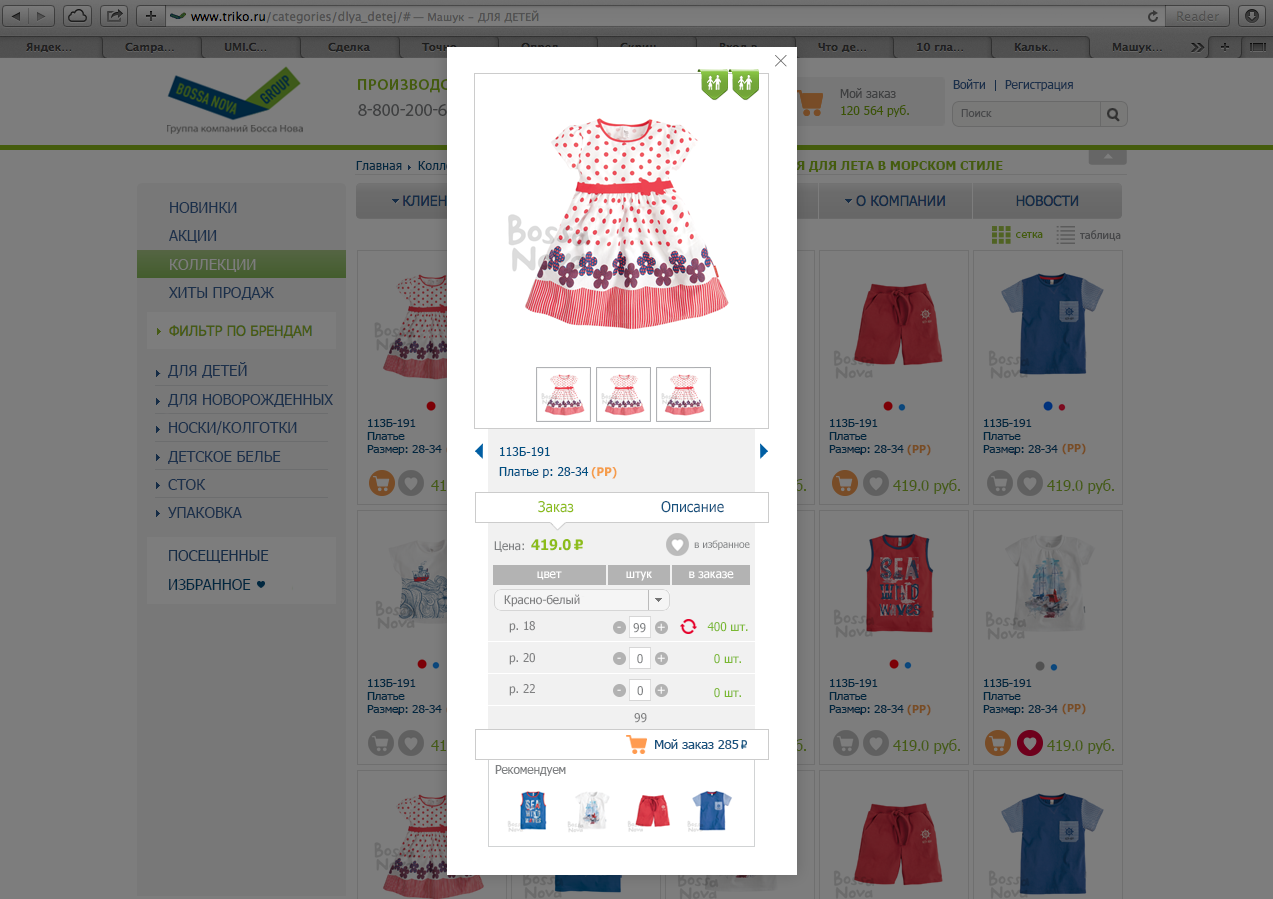
<style>
.page{position:relative;width:1273px;height:899px;background:#7d7d7d}
.page>*{position:absolute;margin:0}
.t1{font:12px "Tahoma";color:#3f4041}
.t2{font:12px "Tahoma";color:#1b304b}
.t3{font:12px "Tahoma";color:#3c5404}
.t4{font:11px "Tahoma";letter-spacing:0.005em;color:#48494b}
.t5{font:12px "Tahoma";color:#00273f;scale:1.04 1}
.t6{font:15.2px/28.4px "Tahoma";letter-spacing:-0.01em;color:#1b304b;text-transform:uppercase}
.t7{font:11.5px "MyriadPro-Regular";color:#455c0d}
.t8{font:11.5px "MyriadPro-Regular";color:#48494b}
.t9{font:15.2px "Tahoma";letter-spacing:-0.01em;color:#7d7d7d;text-transform:uppercase}
.t10{font:11px/13px "Tahoma";color:#00273f;scale:1.05 1}
.t11{font:11px/13px "Tahoma";color:#00273f;text-transform:uppercase;scale:1.05 1}
.t12{font:11.6px/20px "Tahoma";color:#004f81;scale:1.05 1}
.t13{font:11.6px/20px "Tahoma";color:#004f81;text-transform:uppercase;scale:1.05 1}
.t14{font:11px "Tahoma-Bold";letter-spacing:-0.005em;color:#784d25}
.t15{font:12px "Tahoma-Bold";letter-spacing:-0.005em;color:#f59d4b}
.t16{font:15px "Tahoma";letter-spacing:-0.025em;color:#465b15;text-transform:uppercase}
.t17{font:15px "Tahoma";letter-spacing:-0.025em;color:#465b15}
.t18{font:14.8px "Tahoma";letter-spacing:-0.005em;color:#8cbc1a;scale:0.96 1}
.t19{font:14.8px "Tahoma";letter-spacing:-0.005em;color:#17527e;scale:0.96 1}
.t20{font:12px "Tahoma";letter-spacing:-0.005em;color:#808284}
.t21{font:14.8px "Tahoma-Bold";letter-spacing:-0.005em;color:#8cbc1a;scale:0.96 1}
.t22{font:10px "Tahoma";letter-spacing:-0.005em;color:#808284}
.t23{font:15.2px "Tahoma";letter-spacing:-0.01em;color:#152c46;text-transform:uppercase}
.t24{font:15.2px "Tahoma";letter-spacing:-0.01em;color:#00273f;text-transform:uppercase}
.t25{font:12px "Tahoma";letter-spacing:-0.005em;color:#ffffff}
.t26{font:12px "Tahoma";letter-spacing:-0.005em;color:#808182}
.t27{font:12px "Tahoma";letter-spacing:-0.005em;color:#7f8081}
.t28{font:12px "Tahoma";letter-spacing:-0.005em;color:#7bb933}
.t29{font:13px "Tahoma";color:#17527e}
.t30{font:12px "Tahoma";letter-spacing:-0.01em;color:#808284}
</style>
<div class="page">
<p class="t1" style="left:840px;top:88px;width:56px;height:10px">Мой заказ</p>
<p class="t2" style="left:953px;top:79px;width:32px;height:10px">Войти</p>
<p class="t2" style="left:1005px;top:80px;width:68px;height:11px">Регистрация</p>
<p class="t3" style="left:841px;top:105px;width:68px;height:12px">120 564 руб.</p>
<p class="t4" style="left:961px;top:109px;width:31px;height:8px">Поиск</p>
<p class="t5" style="left:356px;top:161px;width:46px;height:9px">Главная</p>
<p class="t6" style="left:169px;top:202px;width:105px;height:98px">НОВИНКИ<br>акции<br>коллекции<br>хиты продаж</p>
<p class="t7" style="left:1016px;top:232px;width:27px;height:6px">сетка</p>
<p class="t8" style="left:1080px;top:230px;width:41px;height:11px">таблица</p>
<p class="t9" style="left:170px;top:259px;width:86px;height:13px">коллекции</p>
<p class="t6" style="left:168px;top:362px;width:165px;height:156px">ДЛЯ ДЕТЕЙ<br>ДЛЯ НОВОРОЖДЕННЫХ<br>НОСКИ/КОЛГОТКИ<br>ДЕТСКОЕ БЕЛЬЕ<br>СТОК<br>УПАКОВКА</p>
<p class="t10" style="left:367px;top:419px;width:75px;height:36px"><span class="t11">113Б-191<br>П</span>латье<br>Размер: 28-34</p>
<p class="t10" style="left:829px;top:419px;width:75px;height:36px"><span class="t11">113Б-191<br>П</span>латье<br>Размер: 28-34</p>
<p class="t10" style="left:983px;top:419px;width:75px;height:36px"><span class="t11">113Б-191<br>П</span>латье<br>Размер: 28-34</p>
<p class="t12" style="left:499px;top:447px;width:90px;height:31px"><span class="t13">113Б-191<br>П</span>латье р: 28-34</p>
<p class="t14" style="left:907px;top:444px;width:24px;height:12px">(РР)</p>
<p class="t14" style="left:1062px;top:443px;width:24px;height:12px">(РР)</p>
<p class="t15" style="left:591px;top:467px;width:26px;height:12px">(РР)</p>
<p class="t16" style="left:893px;top:479px;width:67px;height:15px">419.0 <span class="t17">руб.</span></p>
<p class="t16" style="left:1047px;top:479px;width:67px;height:15px">419.0 <span class="t17">руб.</span></p>
<p class="t18" style="left:538px;top:501px;width:36px;height:12px">Заказ</p>
<p class="t19" style="left:661px;top:501px;width:63px;height:12px">Описание</p>
<p class="t20" style="left:494px;top:541px;width:30px;height:11px">Цена:</p>
<p class="t21" style="left:531px;top:539px;width:40px;height:12px">419.0</p>
<p class="t22" style="left:694px;top:540px;width:56px;height:10px">в избранное</p>
<p class="t23" style="left:169px;top:550px;width:100px;height:13px">ПОСЕЩЕННЫЕ</p>
<p class="t24" style="left:169px;top:579px;width:82px;height:11px">Избранное</p>
<p class="t25" style="left:537px;top:571px;width:25px;height:9px">цвет</p>
<p class="t25" style="left:626px;top:571px;width:26px;height:10px">штук</p>
<p class="t25" style="left:689px;top:571px;width:45px;height:8px">в заказе</p>
<p class="t26" style="left:504px;top:594px;width:76px;height:13px">Красно-белый</p>
<p class="t27" style="left:509px;top:621px;width:26px;height:12px">р. 18</p>
<p class="t25" style="left:617px;top:626px;width:4px;height:2px">-</p>
<p class="t20" style="left:633px;top:623px;width:13px;height:10px">99</p>
<p class="t25" style="left:657px;top:623px;width:8px;height:8px">+</p>
<p class="t28" style="left:707px;top:622px;width:41px;height:10px">400 шт.</p>
<p class="t27" style="left:509px;top:653px;width:26px;height:12px">р. 20</p>
<p class="t20" style="left:637px;top:654px;width:6px;height:10px">0</p>
<p class="t25" style="left:657px;top:654px;width:8px;height:8px">+</p>
<p class="t28" style="left:714px;top:654px;width:27px;height:10px">0 шт.</p>
<p class="t25" style="left:617px;top:657px;width:4px;height:2px">-</p>
<p class="t10" style="left:367px;top:679px;width:75px;height:36px"><span class="t11">113Б-191<br>П</span>латье<br>Размер: 28-34</p>
<p class="t27" style="left:509px;top:684px;width:26px;height:12px">р. 22</p>
<p class="t25" style="left:617px;top:689px;width:4px;height:2px">-</p>
<p class="t20" style="left:637px;top:686px;width:6px;height:10px">0</p>
<p class="t25" style="left:657px;top:686px;width:8px;height:8px">+</p>
<p class="t28" style="left:714px;top:688px;width:27px;height:10px">0 шт.</p>
<p class="t10" style="left:829px;top:679px;width:75px;height:36px"><span class="t11">113Б-191<br>П</span>латье<br>Размер: 28-34</p>
<p class="t10" style="left:983px;top:679px;width:75px;height:36px"><span class="t11">113Б-191<br>П</span>латье<br>Размер: 28-34</p>
<p class="t27" style="left:634px;top:713px;width:13px;height:10px">99</p>
<p class="t14" style="left:907px;top:704px;width:24px;height:12px">(РР)</p>
<p class="t14" style="left:1062px;top:703px;width:24px;height:12px">(РР)</p>
<p class="t29" style="left:655px;top:739px;width:84px;height:10px">Мой заказ 285</p>
<p class="t16" style="left:893px;top:739px;width:67px;height:15px">419.0 <span class="t17">руб.</span></p>
<p class="t16" style="left:1047px;top:739px;width:67px;height:15px">419.0 <span class="t17">руб.</span></p>
<p class="t30" style="left:495px;top:765px;width:71px;height:11px">Рекомендуем</p>
</div>
